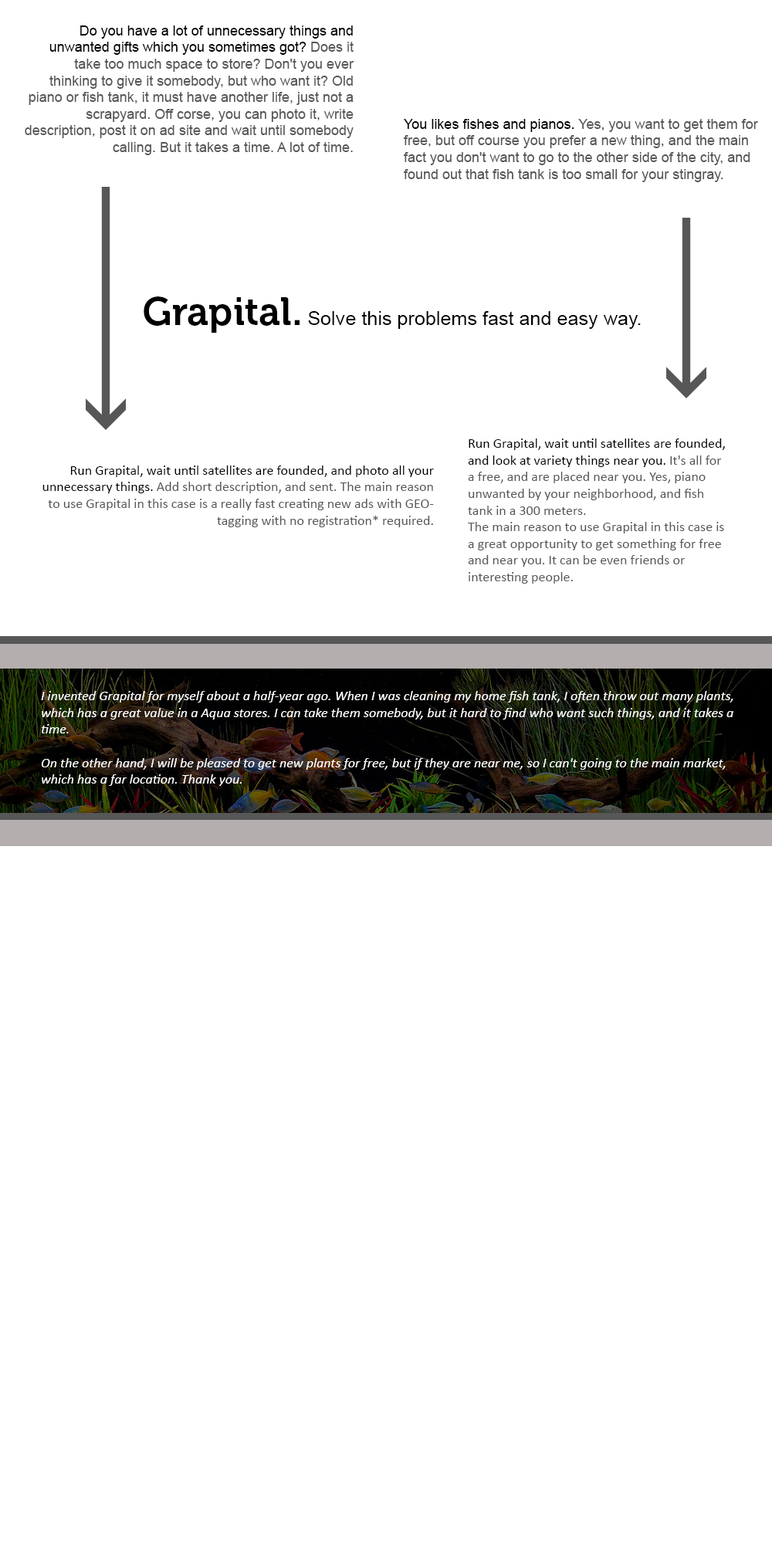
<style>
.page{position:relative;width:772px;height:1544px;background:#ffffff}
.page>*{position:absolute;margin:0}
.t1{font:13.9px "ArialMT";color:#575757}
.t2{font:13.9px "ArialMT";color:#000000}
.t3{font:19.4px "ArialMT";color:#000000}
.t4{font:38.8px "Museo-700";color:#000000}
.t5{font:13.9px "Calibri";color:#575757}
.t6{font:13.9px "Calibri";color:#000000}
.t7{font:13.9px "Calibri-Italic";color:#ffffff}
</style>
<div class="page">
<p class="t1" style="left:25px;top:25px;width:329px;height:130px;text-align:right"><span class="t2">Do you have a lot of unnecessary things and unwanted gifts which you sometimes got?</span> Does it take too much space to store? Don't you ever thinking to give it somebody, but who want it? Old piano or fish tank, it must have another life, just not a scrapyard. Off corse, you can photo it, write description, post it on ad site and wait until somebody calling. But it takes a time. A lot of time.</p>
<p class="t1" style="left:404px;top:119px;width:354px;height:63px"><span class="t2">You likes fishes and pianos. </span>Yes, you want to get them for free, but off course you prefer a new thing, and the main fact you don't want to go to the other side of the city, and found out that fish tank is too small for your stingray.</p>
<p class="t3" style="left:144px;top:297px;width:497px;height:36px"><span class="t4">Grapital.</span> Solve this problems fast and easy way.</p>
<p class="t5" style="left:468px;top:439px;width:257px;height:145px"><span class="t6">Run Grapital, wait until satellites are founded, and look at variety things near you. </span>It's all for a free, and are placed near you. Yes, piano unwanted by your neighborhood, and fish tank in a 300 meters.<br>The main reason to use Grapital in this case is a great opportunity to get something for free and near you. It can be even friends or interesting people.</p>
<p class="t5" style="left:42px;top:466px;width:392px;height:61px;text-align:right"><span class="t6">Run Grapital, wait until satellites are founded, and photo all your unnecessary things.</span> Add short description, and sent. The main reason to use Grapital in this case is a really fast creating new ads with GEO-tagging with no registration* required.</p>
<p class="t7" style="left:41px;top:691px;width:693px;height:95px">I invented Grapital for myself about a half-year ago. When I was cleaning my home fish tank, I often throw out many plants, which has a great value in a Aqua stores. I can take them somebody, but it hard to find who want such things, and it takes a time. <br><br>On the other hand, I will be pleased to get new plants for free, but if they are near me, so I can't going to the main market, which has a far location. Thank you.</p>
</div>
